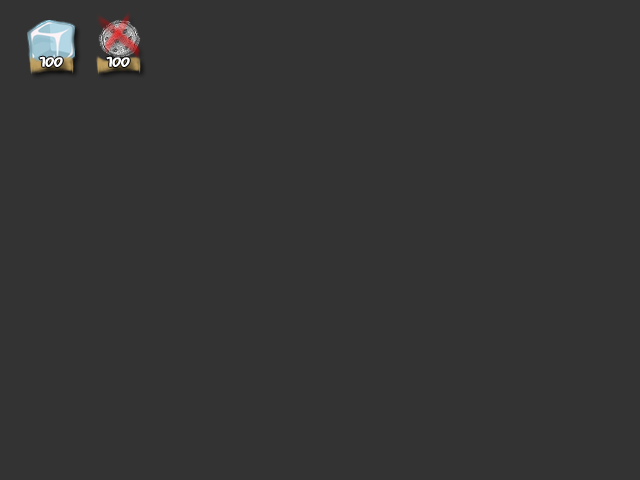
<style>
.page{position:relative;width:640px;height:480px;background:#333333}
.page>*{position:absolute;margin:0}
.t1{font:15.2px "Animated";color:#ffffff;scale:1.36 1}
</style>
<div class="page">
<p class="t1" style="left:39px;top:56px;width:24px;height:11px">100</p>
<p class="t1" style="left:106px;top:56px;width:24px;height:11px">100</p>
</div>
